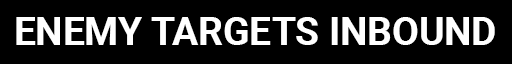
<style>
.page{position:relative;width:512px;height:64px;background:#000000}
.page>*{position:absolute;margin:0}
.t1{font:38.7px "Roboto-Bold";color:#ffffff;text-transform:uppercase}
</style>
<div class="page">
<p class="t1" style="left:16px;top:17px;width:479px;height:28px">ENEMY TARGETS INBOUND</p>
</div>
